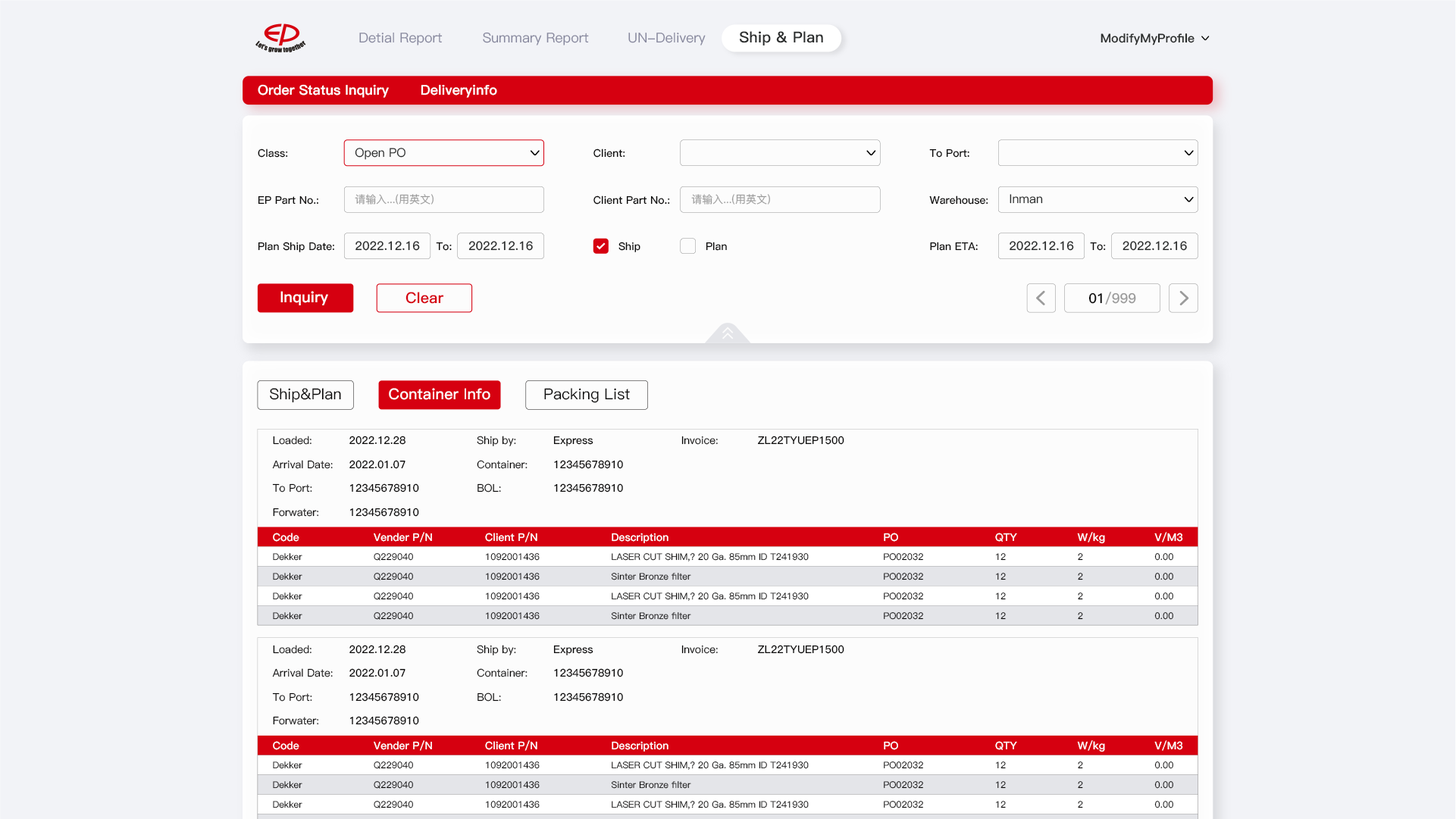
<style>
.page{position:relative;width:1456px;height:819px;background:#f2f3f7}
.page>*{position:absolute;margin:0}
.t1{font:13.6px "PingFang-SC-Medium";color:#87889e}
.t2{font:15.2px "PingFang-SC-Heavy";color:#2b2d2d}
.t3{font:12.1px "PingFang-SC-Heavy";color:#2b2d2d}
.t4{font:13.6px "PingFang-SC-Heavy";color:#ffffff}
.t5{font:10.6px "PingFang-SC-Bold";color:#0b0a0a}
.t6{font:12.1px "PingFang-SC-Medium";color:#2b2d2d}
.t7{font:10.6px "PingFang-SC-Medium";color:#9b9b9b}
.t8{font:12.1px "PingFang-SC-Bold";color:#2b2d2d}
.t9{font:15.2px "PingFang-SC-Heavy";color:#ffffff}
.t10{font:15.2px "PingFang-SC-Heavy";color:#d60010}
.t11{font:13.6px "PingFang-SC-Bold";color:#9b9b9b}
.t12{font:13.6px "PingFang-SC-Bold";color:#0b0a0a}
.t13{font:15.2px "PingFang-SC-Medium";color:#0b0a0a}
.t14{font:15.2px "PingFang-SC-Bold";color:#ffffff}
.t15{font:10.6px "PingFang-SC-Medium";color:#0b0a0a}
.t16{font:10.6px "PingFang-SC-Bold";color:#ffffff}
.t17{font:9.1px "PingFang-SC-Medium";color:#0b0a0a}
</style>
<div class="page">
<p class="t1" style="left:359px;top:33px;width:84px;height:12px">Detial Report</p>
<p class="t1" style="left:483px;top:32px;width:106px;height:13px">Summary Report</p>
<p class="t1" style="left:628px;top:33px;width:77px;height:12px">UN-Delivery</p>
<p class="t2" style="left:739px;top:31px;width:84px;height:14px">Ship &amp; Plan</p>
<p class="t3" style="left:1100px;top:33px;width:94px;height:12px">ModifyMyProfile</p>
<p class="t4" style="left:258px;top:84px;width:239px;height:14px">Order Status Inquiry       Deliveryinfo</p>
<p class="t5" style="left:258px;top:149px;width:30px;height:9px">Class:</p>
<p class="t6" style="left:355px;top:148px;width:50px;height:12px">Open PO</p>
<p class="t5" style="left:593px;top:149px;width:32px;height:9px">Client:</p>
<p class="t5" style="left:929px;top:149px;width:40px;height:9px">To Port:</p>
<p class="t5" style="left:258px;top:196px;width:60px;height:9px">EP Part No.:</p>
<p class="t7" style="left:355px;top:194px;width:78px;height:11px">请输入...(用英文)</p>
<p class="t5" style="left:593px;top:196px;width:77px;height:9px">Client Part No.:</p>
<p class="t7" style="left:691px;top:194px;width:79px;height:11px">请输入...(用英文)</p>
<p class="t5" style="left:929px;top:196px;width:59px;height:9px">Warehouse:</p>
<p class="t6" style="left:1009px;top:194px;width:34px;height:10px">Inman</p>
<p class="t5" style="left:258px;top:242px;width:76px;height:10px">Plan Ship Date:</p>
<p class="t8" style="left:355px;top:241px;width:65px;height:10px">2022.12.16</p>
<p class="t5" style="left:436px;top:242px;width:16px;height:9px">To:</p>
<p class="t8" style="left:468px;top:241px;width:65px;height:10px">2022.12.16</p>
<p class="t5" style="left:618px;top:242px;width:22px;height:10px">Ship</p>
<p class="t5" style="left:705px;top:242px;width:22px;height:9px">Plan</p>
<p class="t5" style="left:930px;top:242px;width:48px;height:9px">Plan ETA:</p>
<p class="t8" style="left:1009px;top:241px;width:65px;height:10px">2022.12.16</p>
<p class="t5" style="left:1090px;top:242px;width:16px;height:9px">To:</p>
<p class="t8" style="left:1122px;top:241px;width:65px;height:10px">2022.12.16</p>
<p class="t9" style="left:280px;top:291px;width:48px;height:14px">Inquiry</p>
<p class="t10" style="left:405px;top:292px;width:38px;height:12px">Clear</p>
<p class="t11" style="left:1088px;top:292px;width:48px;height:13px"><span class="t12">01</span>/999</p>
<p class="t13" style="left:270px;top:388px;width:71px;height:15px">Ship&amp;Plan</p>
<p class="t14" style="left:389px;top:388px;width:101px;height:12px">Container Info</p>
<p class="t13" style="left:544px;top:388px;width:86px;height:15px">Packing List</p>
<p class="t15" style="left:273px;top:436px;width:38px;height:9px">Loaded:</p>
<p class="t5" style="left:349px;top:436px;width:56px;height:9px">2022.12.28</p>
<p class="t15" style="left:477px;top:436px;width:39px;height:10px">Ship by:</p>
<p class="t5" style="left:553px;top:436px;width:40px;height:10px">Express</p>
<p class="t15" style="left:681px;top:436px;width:37px;height:9px">Invoice:</p>
<p class="t5" style="left:757px;top:436px;width:87px;height:9px">ZL22TYUEP1500</p>
<p class="t15" style="left:272px;top:460px;width:61px;height:9px">Arrival Date:</p>
<p class="t5" style="left:349px;top:460px;width:56px;height:9px">2022.01.07</p>
<p class="t15" style="left:477px;top:460px;width:50px;height:9px">Container:</p>
<p class="t5" style="left:554px;top:460px;width:69px;height:9px">12345678910</p>
<p class="t15" style="left:272px;top:483px;width:40px;height:10px">To Port:</p>
<p class="t5" style="left:349px;top:483px;width:70px;height:10px">12345678910</p>
<p class="t15" style="left:477px;top:483px;width:24px;height:10px">BOL:</p>
<p class="t5" style="left:554px;top:483px;width:69px;height:10px">12345678910</p>
<p class="t15" style="left:273px;top:508px;width:46px;height:9px">Forwater:</p>
<p class="t5" style="left:349px;top:508px;width:70px;height:9px">12345678910</p>
<p class="t16" style="left:273px;top:533px;width:26px;height:9px">Code</p>
<p class="t16" style="left:374px;top:532px;width:58px;height:11px">Vender P/N</p>
<p class="t16" style="left:485px;top:532px;width:52px;height:11px">Client P/N</p>
<p class="t16" style="left:612px;top:533px;width:56px;height:10px">Description</p>
<p class="t16" style="left:884px;top:533px;width:14px;height:9px">PO</p>
<p class="t16" style="left:995px;top:533px;width:22px;height:9px">QTY</p>
<p class="t16" style="left:1077px;top:532px;width:28px;height:12px">W/kg</p>
<p class="t16" style="left:1154px;top:532px;width:29px;height:11px">V/M3</p>
<p class="t17" style="left:273px;top:553px;width:29px;height:8px">Dekker</p>
<p class="t17" style="left:374px;top:553px;width:39px;height:8px">Q229040</p>
<p class="t17" style="left:486px;top:553px;width:54px;height:8px">1092001436</p>
<p class="t17" style="left:612px;top:553px;width:197px;height:9px">LASER CUT SHIM,? 20 Ga. 85mm ID T241930</p>
<p class="t17" style="left:884px;top:553px;width:39px;height:8px">PO02032</p>
<p class="t17" style="left:996px;top:553px;width:10px;height:8px">12</p>
<p class="t17" style="left:1078px;top:553px;width:5px;height:8px">2</p>
<p class="t17" style="left:1154px;top:553px;width:19px;height:8px">0.00</p>
<p class="t17" style="left:273px;top:573px;width:29px;height:7px">Dekker</p>
<p class="t17" style="left:374px;top:573px;width:39px;height:7px">Q229040</p>
<p class="t17" style="left:486px;top:573px;width:54px;height:7px">1092001436</p>
<p class="t17" style="left:611px;top:573px;width:80px;height:7px">Sinter Bronze filter</p>
<p class="t17" style="left:884px;top:573px;width:39px;height:7px">PO02032</p>
<p class="t17" style="left:996px;top:573px;width:10px;height:7px">12</p>
<p class="t17" style="left:1078px;top:573px;width:5px;height:7px">2</p>
<p class="t17" style="left:1154px;top:573px;width:19px;height:7px">0.00</p>
<p class="t17" style="left:273px;top:593px;width:29px;height:7px">Dekker</p>
<p class="t17" style="left:374px;top:593px;width:39px;height:7px">Q229040</p>
<p class="t17" style="left:486px;top:593px;width:54px;height:7px">1092001436</p>
<p class="t17" style="left:612px;top:593px;width:197px;height:8px">LASER CUT SHIM,? 20 Ga. 85mm ID T241930</p>
<p class="t17" style="left:884px;top:593px;width:39px;height:7px">PO02032</p>
<p class="t17" style="left:996px;top:593px;width:10px;height:7px">12</p>
<p class="t17" style="left:1078px;top:593px;width:5px;height:7px">2</p>
<p class="t17" style="left:1154px;top:593px;width:19px;height:7px">0.00</p>
<p class="t17" style="left:273px;top:612px;width:29px;height:8px">Dekker</p>
<p class="t17" style="left:374px;top:612px;width:39px;height:8px">Q229040</p>
<p class="t17" style="left:486px;top:612px;width:54px;height:8px">1092001436</p>
<p class="t17" style="left:611px;top:612px;width:80px;height:8px">Sinter Bronze filter</p>
<p class="t17" style="left:884px;top:612px;width:39px;height:8px">PO02032</p>
<p class="t17" style="left:996px;top:612px;width:10px;height:8px">12</p>
<p class="t17" style="left:1078px;top:612px;width:5px;height:8px">2</p>
<p class="t17" style="left:1154px;top:612px;width:19px;height:8px">0.00</p>
<p class="t15" style="left:273px;top:645px;width:38px;height:9px">Loaded:</p>
<p class="t5" style="left:349px;top:645px;width:56px;height:9px">2022.12.28</p>
<p class="t15" style="left:477px;top:645px;width:39px;height:10px">Ship by:</p>
<p class="t5" style="left:553px;top:645px;width:40px;height:10px">Express</p>
<p class="t15" style="left:681px;top:645px;width:37px;height:9px">Invoice:</p>
<p class="t5" style="left:757px;top:645px;width:87px;height:9px">ZL22TYUEP1500</p>
<p class="t15" style="left:272px;top:668px;width:61px;height:9px">Arrival Date:</p>
<p class="t5" style="left:349px;top:668px;width:56px;height:9px">2022.01.07</p>
<p class="t15" style="left:477px;top:668px;width:50px;height:9px">Container:</p>
<p class="t5" style="left:554px;top:668px;width:69px;height:9px">12345678910</p>
<p class="t15" style="left:272px;top:693px;width:40px;height:9px">To Port:</p>
<p class="t5" style="left:349px;top:693px;width:70px;height:9px">12345678910</p>
<p class="t15" style="left:477px;top:693px;width:24px;height:9px">BOL:</p>
<p class="t5" style="left:554px;top:693px;width:69px;height:9px">12345678910</p>
<p class="t15" style="left:273px;top:716px;width:46px;height:9px">Forwater:</p>
<p class="t5" style="left:349px;top:716px;width:70px;height:9px">12345678910</p>
<p class="t16" style="left:273px;top:741px;width:26px;height:9px">Code</p>
<p class="t16" style="left:374px;top:740px;width:58px;height:11px">Vender P/N</p>
<p class="t16" style="left:485px;top:740px;width:52px;height:11px">Client P/N</p>
<p class="t16" style="left:612px;top:741px;width:56px;height:11px">Description</p>
<p class="t16" style="left:884px;top:741px;width:14px;height:9px">PO</p>
<p class="t16" style="left:995px;top:741px;width:22px;height:9px">QTY</p>
<p class="t16" style="left:1077px;top:740px;width:28px;height:12px">W/kg</p>
<p class="t16" style="left:1154px;top:740px;width:29px;height:11px">V/M3</p>
<p class="t17" style="left:273px;top:762px;width:29px;height:7px">Dekker</p>
<p class="t17" style="left:374px;top:762px;width:39px;height:7px">Q229040</p>
<p class="t17" style="left:486px;top:762px;width:54px;height:7px">1092001436</p>
<p class="t17" style="left:612px;top:762px;width:197px;height:8px">LASER CUT SHIM,? 20 Ga. 85mm ID T241930</p>
<p class="t17" style="left:884px;top:762px;width:39px;height:7px">PO02032</p>
<p class="t17" style="left:996px;top:762px;width:10px;height:7px">12</p>
<p class="t17" style="left:1078px;top:762px;width:5px;height:7px">2</p>
<p class="t17" style="left:1154px;top:762px;width:19px;height:7px">0.00</p>
<p class="t17" style="left:273px;top:781px;width:29px;height:8px">Dekker</p>
<p class="t17" style="left:374px;top:781px;width:39px;height:8px">Q229040</p>
<p class="t17" style="left:486px;top:781px;width:54px;height:8px">1092001436</p>
<p class="t17" style="left:611px;top:781px;width:80px;height:8px">Sinter Bronze filter</p>
<p class="t17" style="left:884px;top:781px;width:39px;height:8px">PO02032</p>
<p class="t17" style="left:996px;top:781px;width:10px;height:8px">12</p>
<p class="t17" style="left:1078px;top:781px;width:5px;height:8px">2</p>
<p class="t17" style="left:1154px;top:781px;width:19px;height:8px">0.00</p>
<p class="t17" style="left:273px;top:801px;width:29px;height:8px">Dekker</p>
<p class="t17" style="left:374px;top:801px;width:39px;height:8px">Q229040</p>
<p class="t17" style="left:486px;top:801px;width:54px;height:8px">1092001436</p>
<p class="t17" style="left:612px;top:801px;width:197px;height:8px">LASER CUT SHIM,? 20 Ga. 85mm ID T241930</p>
<p class="t17" style="left:884px;top:801px;width:39px;height:8px">PO02032</p>
<p class="t17" style="left:996px;top:801px;width:10px;height:8px">12</p>
<p class="t17" style="left:1078px;top:801px;width:5px;height:8px">2</p>
<p class="t17" style="left:1154px;top:801px;width:19px;height:8px">0.00</p>
</div>
